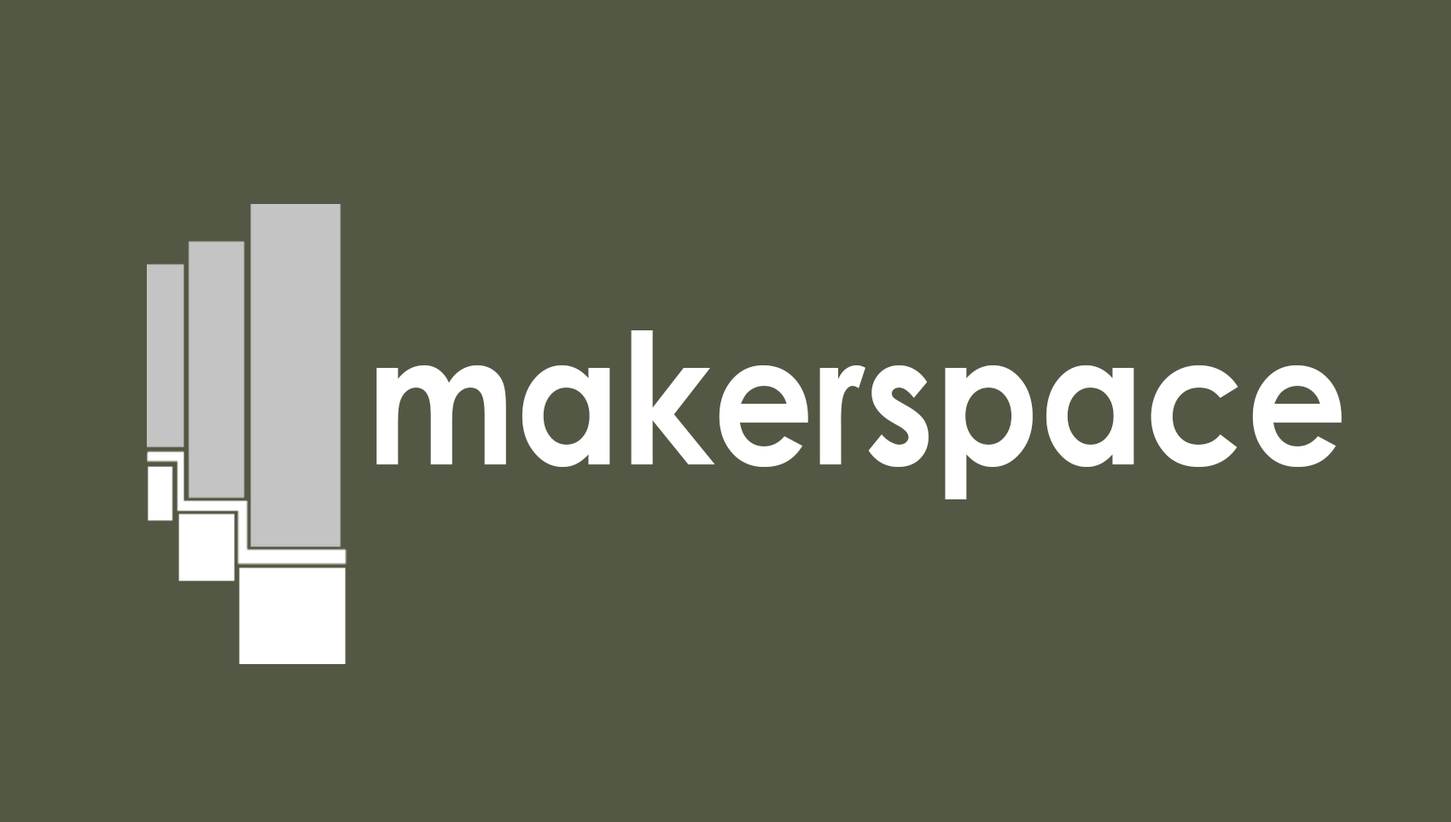
<style>
.page{position:relative;width:1451px;height:822px;background:#525843}
.page>*{position:absolute;margin:0}
.t1{font:181.9px "CenturyGothic-Bold";color:#ffffff;scale:0.87 1}
</style>
<div class="page">
<p class="t1" style="left:376px;top:330px;width:966px;height:169px">makerspace</p>
</div>
